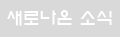
<style>
.page{position:relative;width:120px;height:37px;background:#d9d9d9}
.page>*{position:absolute;margin:0}
.t1{font:16.7px "ExpoM-HM";color:#ffffff}
</style>
<div class="page">
<p class="t1" style="left:7px;top:10px;width:105px;height:16px">새로나온 소식</p>
</div>
